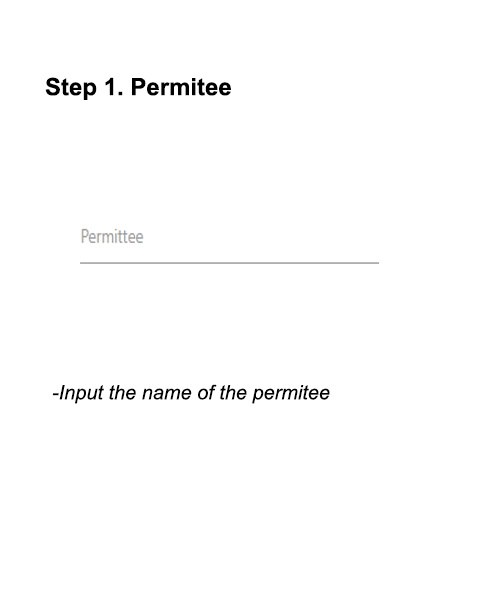
<style>
.page{position:relative;width:500px;height:600px;background:#ffffff}
.page>*{position:absolute;margin:0}
.t1{font:24px "Arial-BoldMT";color:#000000}
.t2{font:20px "Arial-ItalicMT";color:#000000}
</style>
<div class="page">
<p class="t1" style="left:45px;top:77px;width:186px;height:23px">Step 1. Permitee</p>
<p class="t2" style="left:52px;top:384px;width:278px;height:20px">-Input the name of the permitee</p>
</div>
